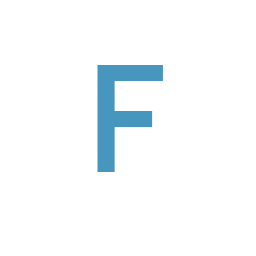
<style>
.page{position:relative;width:256px;height:256px;background:#ffffff}
.page>*{position:absolute;margin:0}
.t1{font:150px "AbletonSansSmall-Regular";color:#4696bd}
</style>
<div class="page">
<p class="t1" style="left:97px;top:65px;width:66px;height:107px">F</p>
</div>
